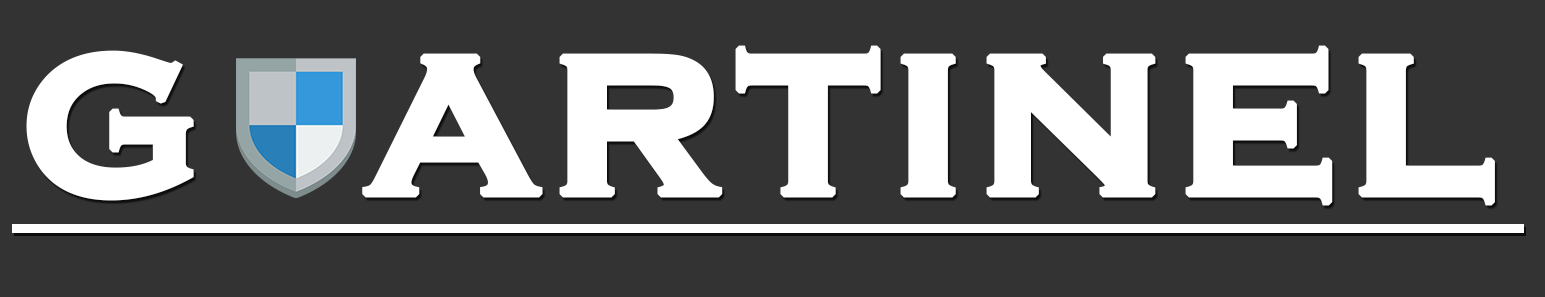
<style>
.page{position:relative;width:1545px;height:297px;background:#333333}
.page>*{position:absolute;margin:0}
.t1{font:249.7px "CopperplateGothic-Bold";letter-spacing:0.025em;color:#ffffff;font-weight:bold}
</style>
<div class="page">
<p class="t1" style="left:26px;top:45px;width:1469px;height:161px">g  artinel</p>
</div>
